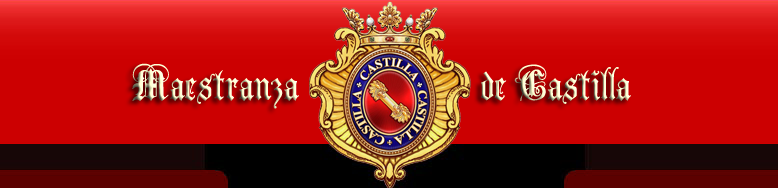
<style>
.page{position:relative;width:778px;height:188px;background:#cc0001}
.page>*{position:absolute;margin:0}
.t1{font:45px "AnglicanText"}
</style>
<div class="page">
<p class="t1" style="left:132px;top:63px;width:167px;height:46px">Maestranza</p>
<p class="t1" style="left:481px;top:64px;width:150px;height:40px">de Castilla</p>
</div>
